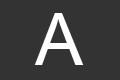
<style>
.page{position:relative;width:120px;height:80px;background:#333333}
.page>*{position:absolute;margin:0}
.t1{font:72px "ArialMT";color:#ffffff}
</style>
<div class="page">
<p class="t1" style="left:34px;top:13px;width:50px;height:52px">A</p>
</div>
